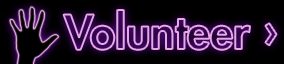
<style>
.page{position:relative;width:284px;height:64px;background:#000000}
.page>*{position:absolute;margin:0}
.t1{font:45.9px "FuturaStd-Heavy"}
</style>
<div class="page">
<p class="t1" style="left:63px;top:10px;width:214px;height:40px">Volunteer ›</p>
</div>
